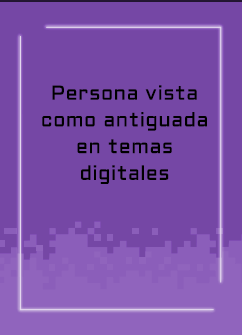
<style>
.page{position:relative;width:242px;height:335px;background:#7547a5}
.page>*{position:absolute;margin:0}
.t1{font:20px/26.7px "Aldrich-Regular";letter-spacing:0.025em;color:#000000}
</style>
<div class="page">
<p class="t1" style="left:42px;top:85px;width:165px;height:99px;text-align:center">Persona vista<br>como antiguada<br>en temas<br>digitales</p>
</div>
